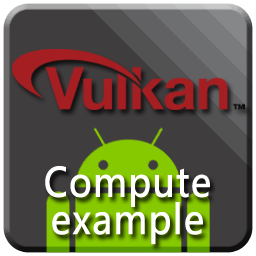
<style>
.page{position:relative;width:256px;height:256px;background:#3f3d3d}
.page>*{position:absolute;margin:0}
.t1{font:40px/37.3px "YuGothic-Bold";letter-spacing:0.005em;color:#ffffff;font-weight:bold;scale:0.9 1}
</style>
<div class="page">
<p class="t1" style="left:45px;top:166px;width:165px;height:79px;text-align:center">Compute<br>example</p>
</div>
